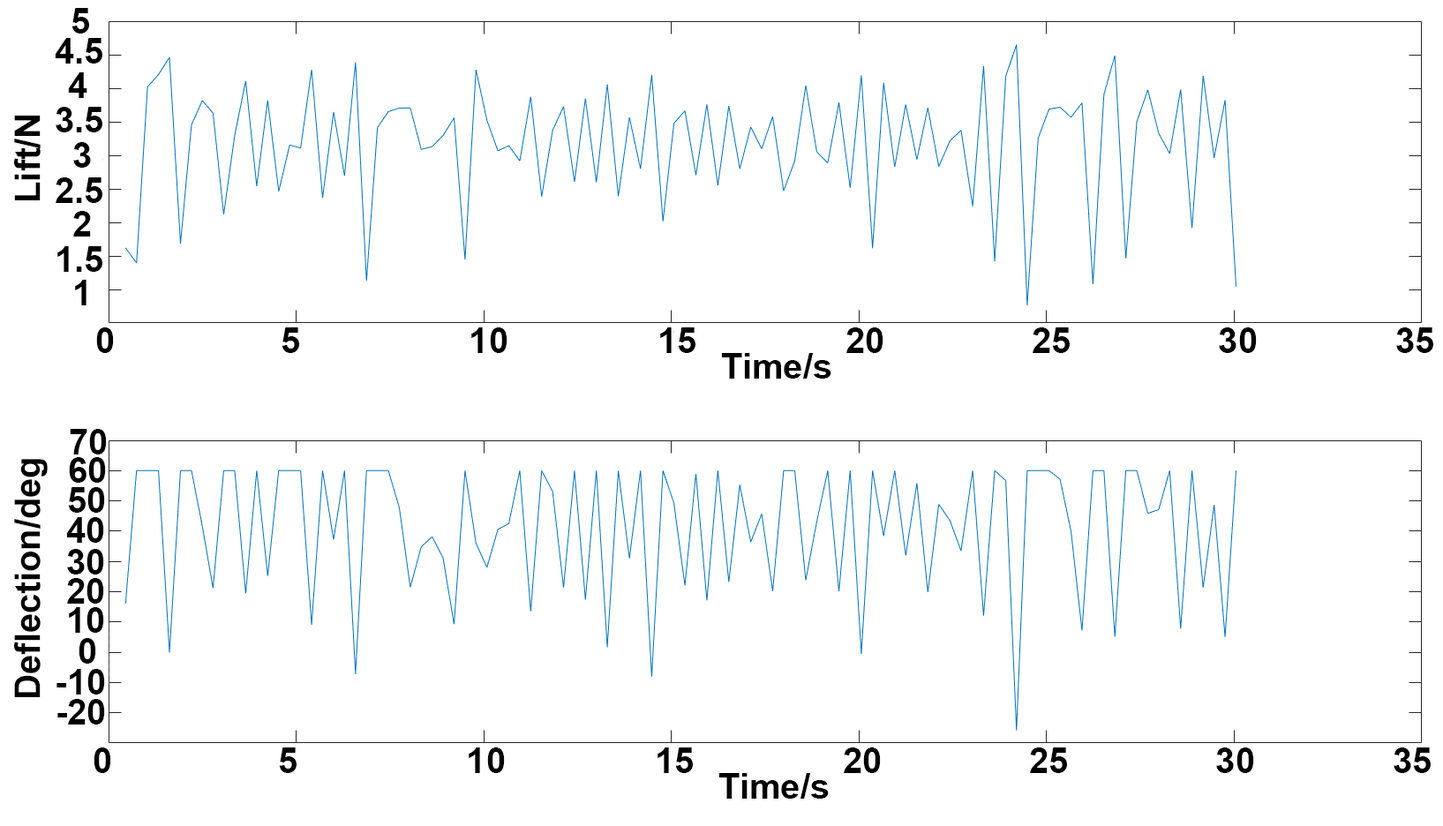
<style>
.page{position:relative;width:1443px;height:826px;background:#ffffff}
.page>*{position:absolute;margin:0}
.t1{font:35.3px "Arial-BoldMT";color:#000000}
.t2{font:35.5px "Arial-BoldMT";color:#000000}
</style>
<div class="page">
<p class="t1" style="left:71px;top:8px;width:18px;height:26px">5</p>
<p class="t1" style="left:55px;top:38px;width:47px;height:26px">4.5</p>
<p class="t1" style="left:68px;top:72px;width:19px;height:26px">4</p>
<p class="t1" style="left:56px;top:107px;width:46px;height:25px">3.5</p>
<p class="t1" style="left:14px;top:116px;width:27px;height:84px;rotate:-90deg">Lift/N</p>
<p class="t1" style="left:73px;top:142px;width:18px;height:26px">3</p>
<p class="t2" style="left:56px;top:177px;width:46px;height:26px">2.5</p>
<p class="t1" style="left:73px;top:211px;width:18px;height:26px">2</p>
<p class="t1" style="left:57px;top:246px;width:45px;height:26px">1.5</p>
<p class="t1" style="left:75px;top:280px;width:12px;height:25px">1</p>
<p class="t1" style="left:96px;top:327px;width:18px;height:26px">0</p>
<p class="t1" style="left:282px;top:327px;width:1152px;height:26px">5        10         15           20               25               30              35</p>
<p class="t1" style="left:721px;top:353px;width:111px;height:26px">Time/s</p>
<p class="t1" style="left:70px;top:429px;width:37px;height:26px">70</p>
<p class="t1" style="left:14px;top:459px;width:34px;height:238px;rotate:-90deg">Deflection/deg</p>
<p class="t1" style="left:69px;top:457px;width:37px;height:26px">60</p>
<p class="t1" style="left:68px;top:487px;width:37px;height:26px">50</p>
<p class="t1" style="left:66px;top:517px;width:38px;height:26px">40</p>
<p class="t1" style="left:67px;top:549px;width:37px;height:26px">30</p>
<p class="t1" style="left:67px;top:578px;width:37px;height:26px">20</p>
<p class="t1" style="left:69px;top:607px;width:35px;height:26px">10</p>
<p class="t1" style="left:79px;top:638px;width:17px;height:26px">0</p>
<p class="t1" style="left:56px;top:669px;width:49px;height:26px">-10</p>
<p class="t1" style="left:57px;top:699px;width:48px;height:26px">-20</p>
<p class="t1" style="left:94px;top:748px;width:17px;height:25px">0</p>
<p class="t1" style="left:279px;top:748px;width:1152px;height:25px">5        10         15           20               25               30              35</p>
<p class="t1" style="left:719px;top:773px;width:110px;height:26px">Time/s</p>
</div>
